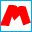
<style>
.page{position:relative;width:32px;height:32px;background:#ffffff}
.page>*{position:absolute;margin:0}
.t1{font:25px "Chlorinap-Regular";letter-spacing:0.1em;color:#ff0000}
</style>
<div class="page">
<p class="t1" style="left:0px;top:5px;width:31px;height:21px">M</p>
</div>
